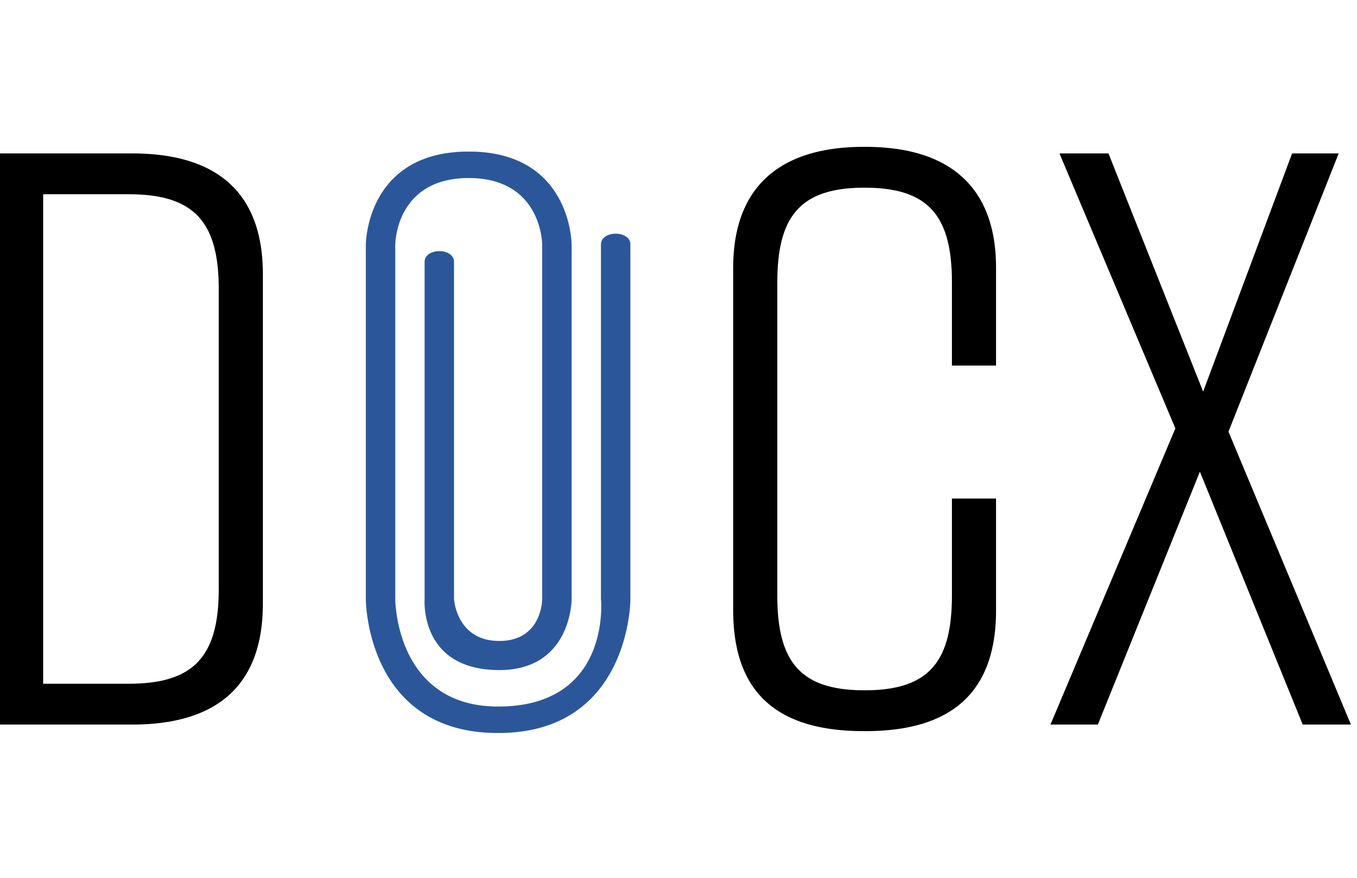
<style>
.page{position:relative;width:1357px;height:878px;background:#ffffff}
.page>*{position:absolute;margin:0}
.t1{font:816.6px "Rift-Regular";color:#000000}
</style>
<div class="page">
<p class="t1" style="left:0px;top:146px;width:1351px;height:586px">DOCX</p>
</div>
